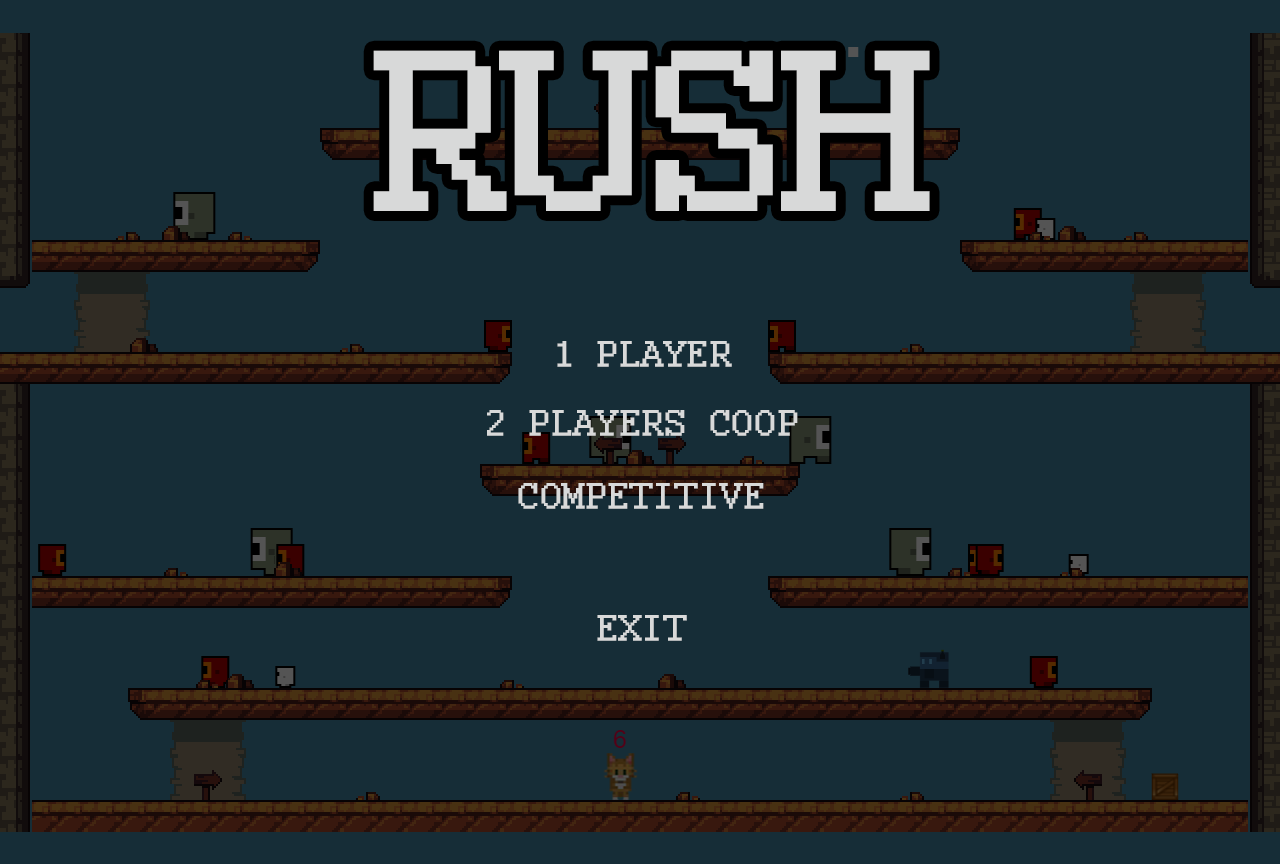
<style>
.page{position:relative;width:1280px;height:864px;background:#162d37}
.page>*{position:absolute;margin:0}
.t1{font:250px "Courier";color:#d8d9d9;font-weight:bold}
.t2{font:40px "Courier";color:#d8d9d9;text-transform:uppercase;font-weight:bold}
</style>
<div class="page">
<p class="t1" style="left:373px;top:50px;width:557px;height:161px">RUSH</p>
<p class="t2" style="left:557px;top:341px;width:175px;height:26px">1 player</p>
<p class="t2" style="left:487px;top:410px;width:311px;height:26px">2 players Coop</p>
<p class="t2" style="left:518px;top:483px;width:246px;height:26px">Competitive</p>
<p class="t2" style="left:597px;top:615px;width:90px;height:26px">EXIT</p>
</div>
